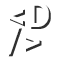
<style>
.page{position:relative;width:57px;height:57px;background:#ffffff}
.page>*{position:absolute;margin:0}
.t1{font:36px/25px "Roboto-Bold";letter-spacing:0.04em}
</style>
<div class="page">
<p class="t1" style="left:8px;top:3px;width:43px;height:54px">&lt;D<br>/&gt;</p>
</div>
